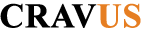
<style>
.page{position:relative;width:143px;height:32px;background:#ffffff}
.page>*{position:absolute;margin:0}
.t1{font:34px "TimesNewRomanPS-BoldMT";color:#000000;font-weight:bold}
.t2{font:34px "TimesNewRomanPS-BoldMT";color:#e67e22;font-weight:bold}
</style>
<div class="page">
<p class="t1" style="left:0px;top:3px;width:141px;height:25px">CRAV<span class="t2">US</span></p>
</div>
